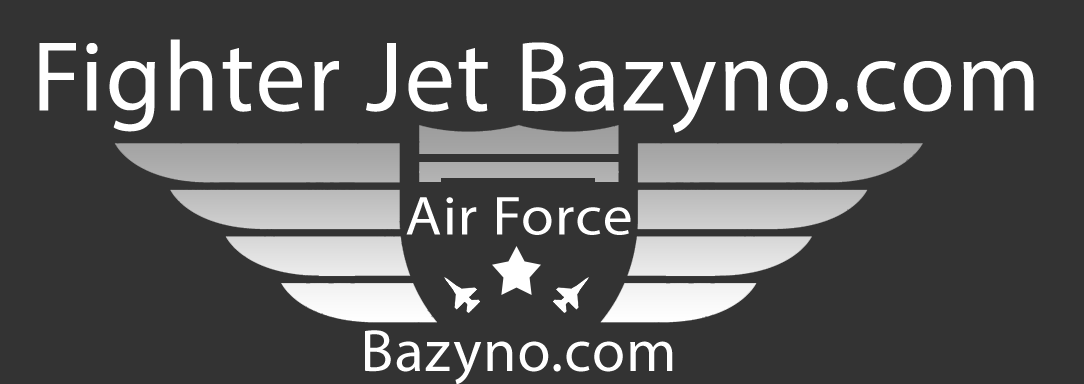
<style>
.page{position:relative;width:1084px;height:384px;background:#333333}
.page>*{position:absolute;margin:0}
.t1{font:100px "MyriadPro-Regular";letter-spacing:0.02em;color:#ffffff}
.t2{font:55.4px "MyriadPro-Regular";letter-spacing:0.02em;color:#ffffff;scale:1.08 1}
.t3{font:60px "MyriadPro-Regular";letter-spacing:0.02em;color:#ffffff}
</style>
<div class="page">
<p class="t1" style="left:39px;top:39px;width:995px;height:94px">Fighter Jet</p>
<p class="t2" style="left:406px;top:197px;width:225px;height:38px">Air Force</p>
<p class="t3" style="left:365px;top:330px;width:308px;height:55px">Bazyno.com</p>
</div>
